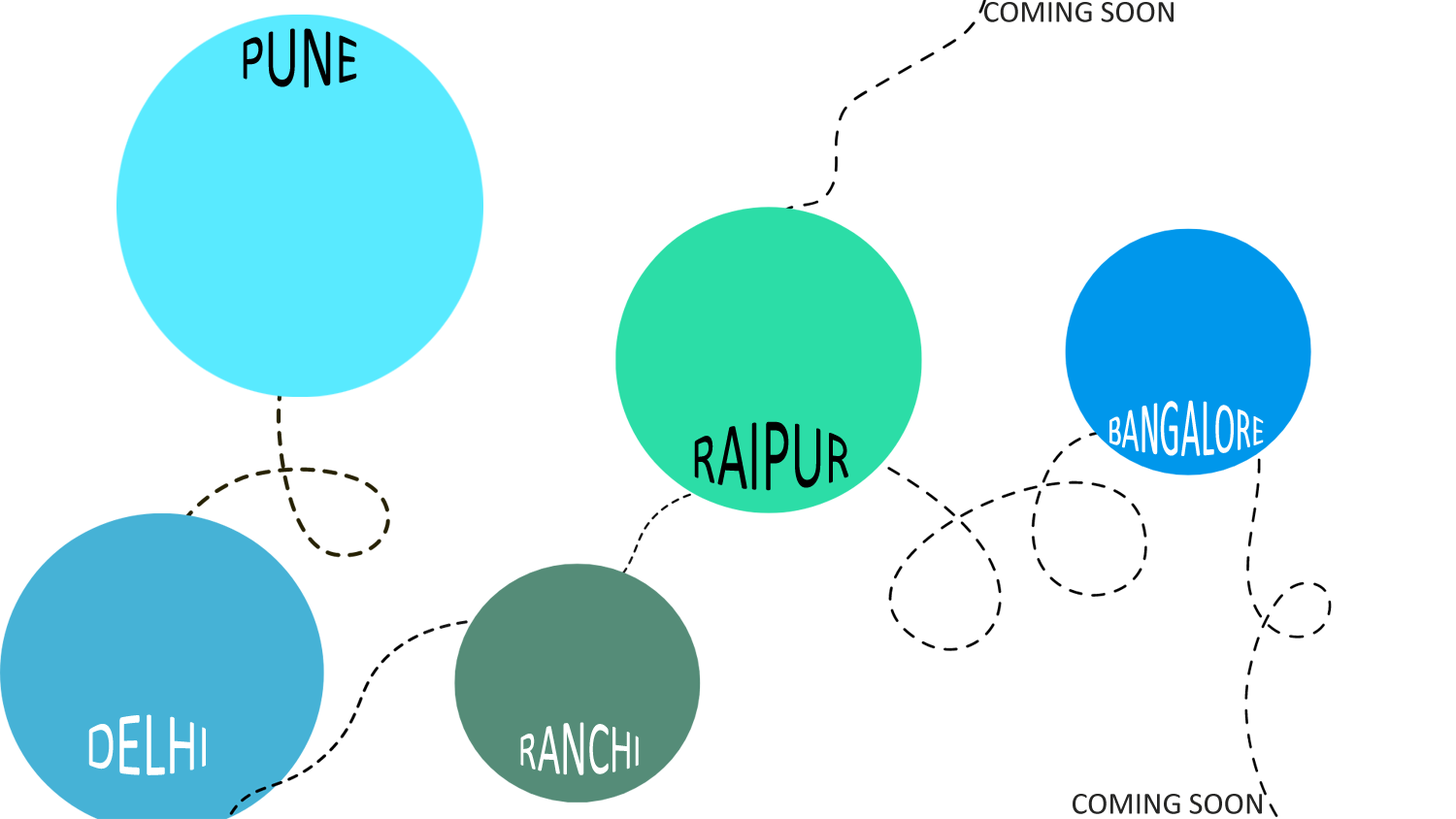
<style>
.page{position:relative;width:1456px;height:819px;background:#ffffff}
.page>*{position:absolute;margin:0}
.t1{font:31.1px "Calibri";color:#262625}
.t2{font:51.8px "Calibri";color:#000000}
.t3{font:31.1px "Calibri";color:#ffffff}
.t4{font:51.8px "Calibri";color:#ffffff}
.t5{font:38.8px "Calibri";color:#ffffff}
</style>
<div class="page">
<p class="t1" style="left:984px;top:2px;width:189px;height:20px">COMING SOON</p>
<p class="t2" style="left:243px;top:28px;width:114px;height:60px">PUNE</p>
<p class="t3" style="left:1109px;top:400px;width:155px;height:56px;text-align:center">BANGALORE</p>
<p class="t2" style="left:694px;top:421px;width:154px;height:70px">RAIPUR</p>
<p class="t4" style="left:88px;top:714px;width:118px;height:61px">DELHI</p>
<p class="t5" style="left:520px;top:722px;width:119px;height:53px">RANCHI</p>
<p class="t1" style="left:1072px;top:794px;width:190px;height:20px">COMING SOON</p>
</div>
